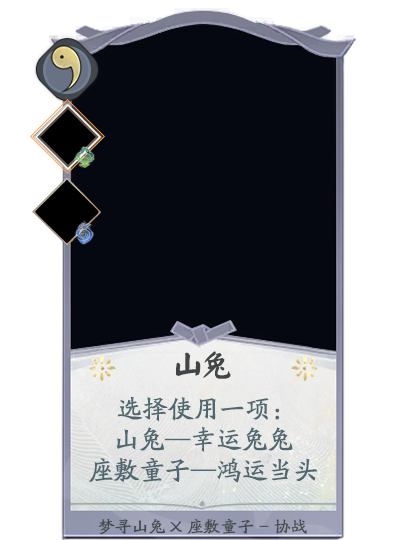
<style>
.page{position:relative;width:397px;height:540px;background:#060811}
.page>*{position:absolute;margin:0}
.t1{font:28px "Tianshi-Yanti";color:#414546;scale:1.03 1}
.t2{font:26px/30.7px "FZBeiWeiKaiShu-S19";color:#50676f}
.t3{font:16px "FZBeiWeiKaiShu-S19";color:#414546;scale:1.06 1}
</style>
<div class="page">
<p class="t1" style="left:176px;top:351px;width:55px;height:28px">山兔</p>
<p class="t2" style="left:89px;top:396px;width:229px;height:87px;text-align:center">选择使用一项：<br>山兔—幸运兔兔<br>座敷童子—鸿运当头</p>
<p class="t3" style="left:98px;top:518px;width:209px;height:17px">梦寻山兔X座敷童子-协战</p>
</div>
